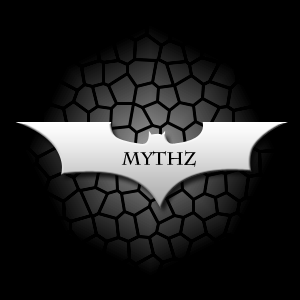
<style>
.page{position:relative;width:300px;height:300px;background:#000000}
.page>*{position:absolute;margin:0}
.t1{font:18px "CharlemagneStd-Bold";color:#000000}
</style>
<div class="page">
<p class="t1" style="left:121px;top:150px;width:75px;height:17px">mythz</p>
</div>
